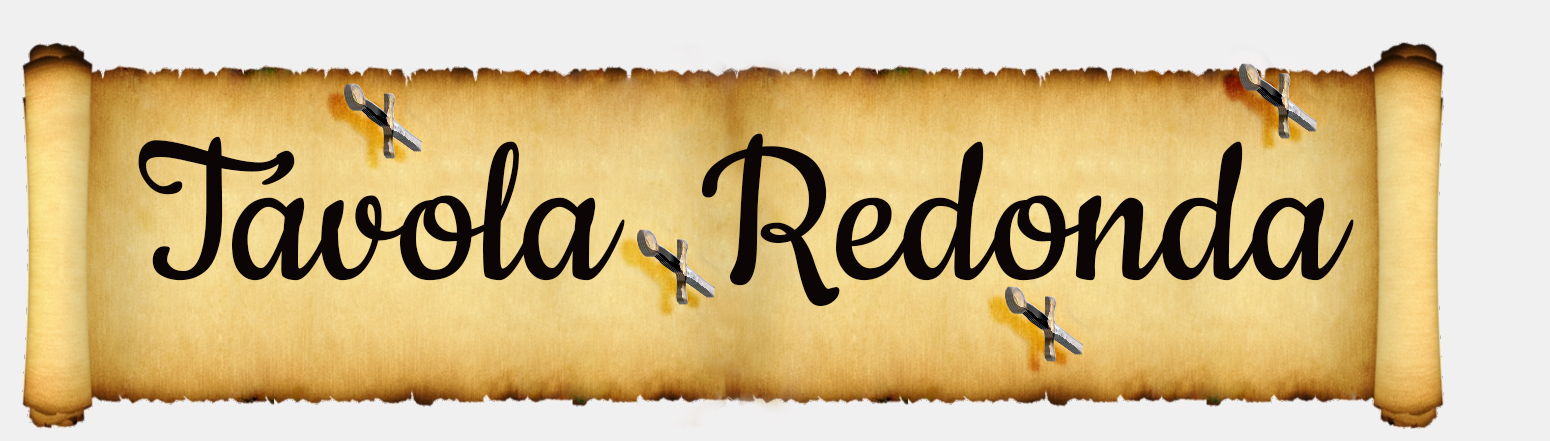
<style>
.page{position:relative;width:1550px;height:441px;background:#f1f0f0}
.page>*{position:absolute;margin:0}
.t1{font:229.2px "Cookie-Regular";color:#0b0505}
</style>
<div class="page">
<p class="t1" style="left:138px;top:133px;width:1216px;height:174px">Távola  Redonda</p>
</div>
